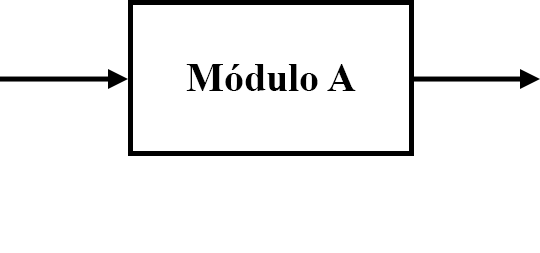
<style>
.page{position:relative;width:540px;height:253px;background:#ffffff}
.page>*{position:absolute;margin:0}
.t1{font:40px "TimesNewRomanPS-BoldMT";color:#000000}
</style>
<div class="page">
<p class="t1" style="left:186px;top:64px;width:170px;height:27px">Módulo A</p>
</div>
